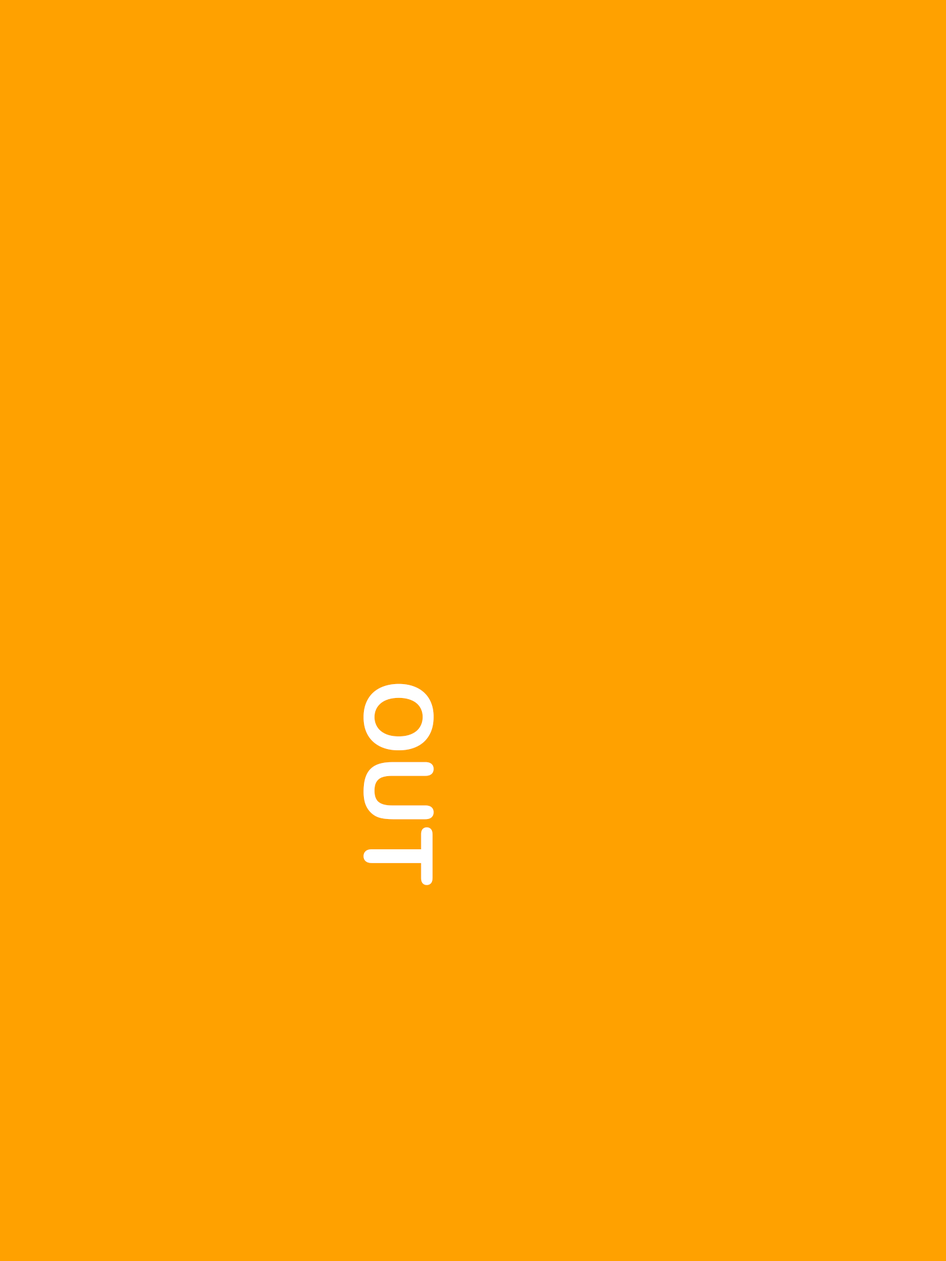
<style>
.page{position:relative;width:946px;height:1261px;background:#ffa100}
.page>*{position:absolute;margin:0}
.t1{font:94.6px "ArialRoundedMTBold";color:#ffffff}
</style>
<div class="page">
<p class="t1" style="left:363px;top:683px;width:71px;height:202px;rotate:90deg">OUT</p>
</div>
